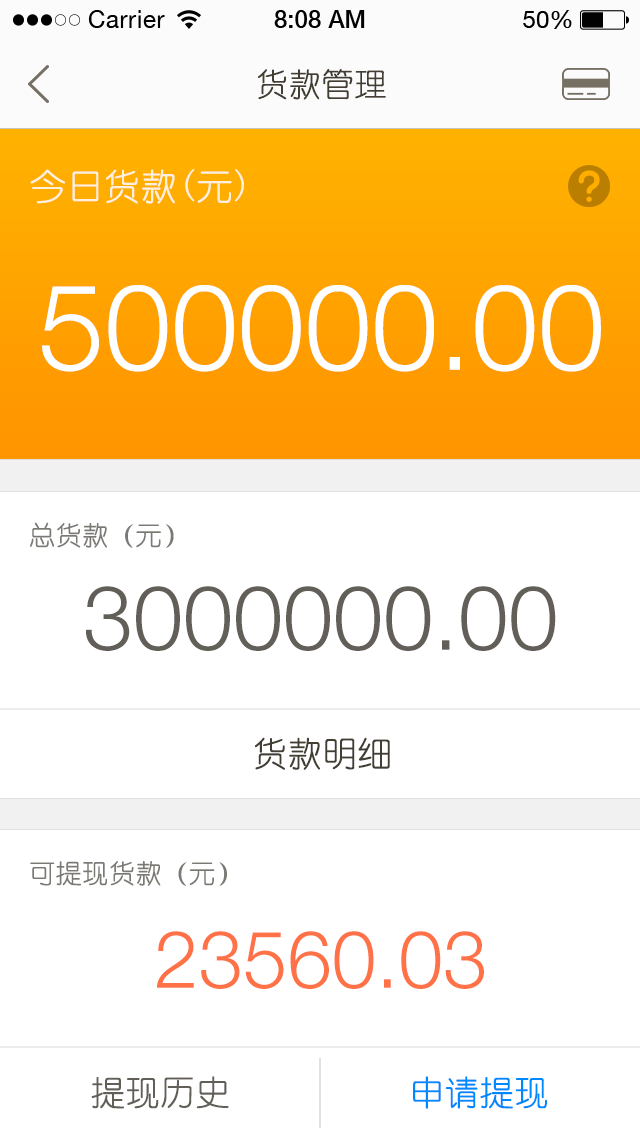
<style>
.page{position:relative;width:640px;height:1136px;background:#ffffff}
.page>*{position:absolute;margin:0}
.t1{font:32px "YouYuan";color:#433d33;text-transform:uppercase;font-weight:bold}
.t2{font:36px "YouYuan";color:#fff0dd;text-transform:uppercase;font-weight:bold}
.t3{font:120px "HelveticaNeueLTPro-Lt";color:#ffffff;font-variant:small-caps}
.t4{font:26px "YouYuan";color:#7b7973;text-transform:uppercase;font-weight:bold}
.t5{font:90px "HelveticaNeueLTPro-Lt";color:#625e58;text-transform:uppercase}
.t6{font:34px "YouYuan";color:#433e34;text-transform:uppercase;font-weight:bold}
.t7{font:80px "HelveticaNeueLTPro-Lt";color:#ff7248;text-transform:uppercase}
.t8{font:34px "YouYuan";color:#625e58;text-transform:uppercase;font-weight:bold}
.t9{font:34px "YouYuan";color:#0088ff;text-transform:uppercase;font-weight:bold}
</style>
<div class="page">
<p class="t1" style="left:258px;top:69px;width:128px;height:31px">货款管理</p>
<p class="t2" style="left:30px;top:168px;width:214px;height:36px">今日货款(元)</p>
<p class="t3" style="left:42px;top:285px;width:559px;height:87px">500000.00</p>
<p class="t4" style="left:30px;top:522px;width:144px;height:26px">总货款（元）</p>
<p class="t5" style="left:86px;top:586px;width:470px;height:65px">3000000.00</p>
<p class="t6" style="left:255px;top:737px;width:135px;height:33px">货款明细</p>
<p class="t4" style="left:30px;top:861px;width:197px;height:25px">可提现货款（元）</p>
<p class="t7" style="left:157px;top:931px;width:327px;height:58px">23560.03</p>
<p class="t8" style="left:91px;top:1076px;width:138px;height:33px">提现历史</p>
<p class="t9" style="left:413px;top:1076px;width:134px;height:33px">申请提现</p>
</div>
